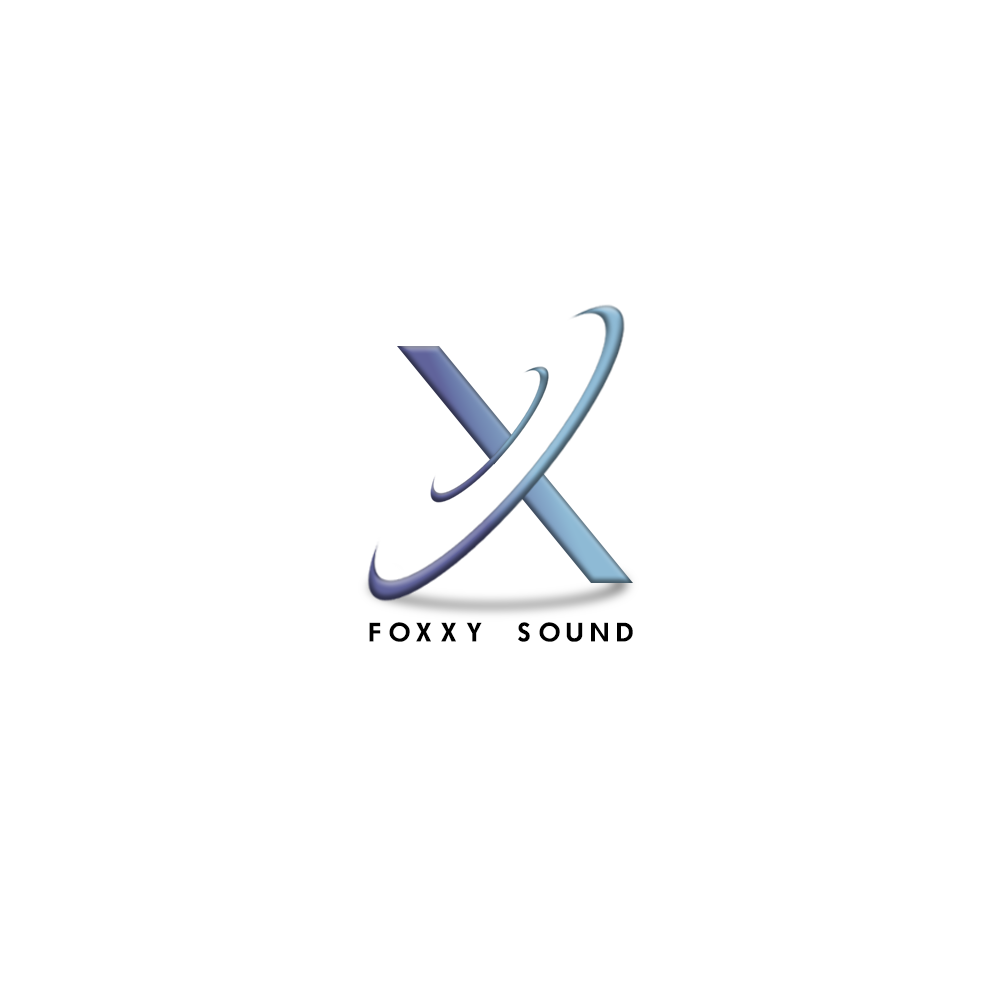
<style>
.page{position:relative;width:1000px;height:1000px;background:#ffffff}
.page>*{position:absolute;margin:0}
.t1{font:25px "FuturistFixedWidthBold";color:#000000;text-transform:uppercase}
</style>
<div class="page">
<p class="t1" style="left:369px;top:622px;width:264px;height:20px">FOXXY SOUND</p>
<p class="t1" style="left:369px;top:622px;width:264px;height:20px">FOXXY SOUND</p>
</div>
